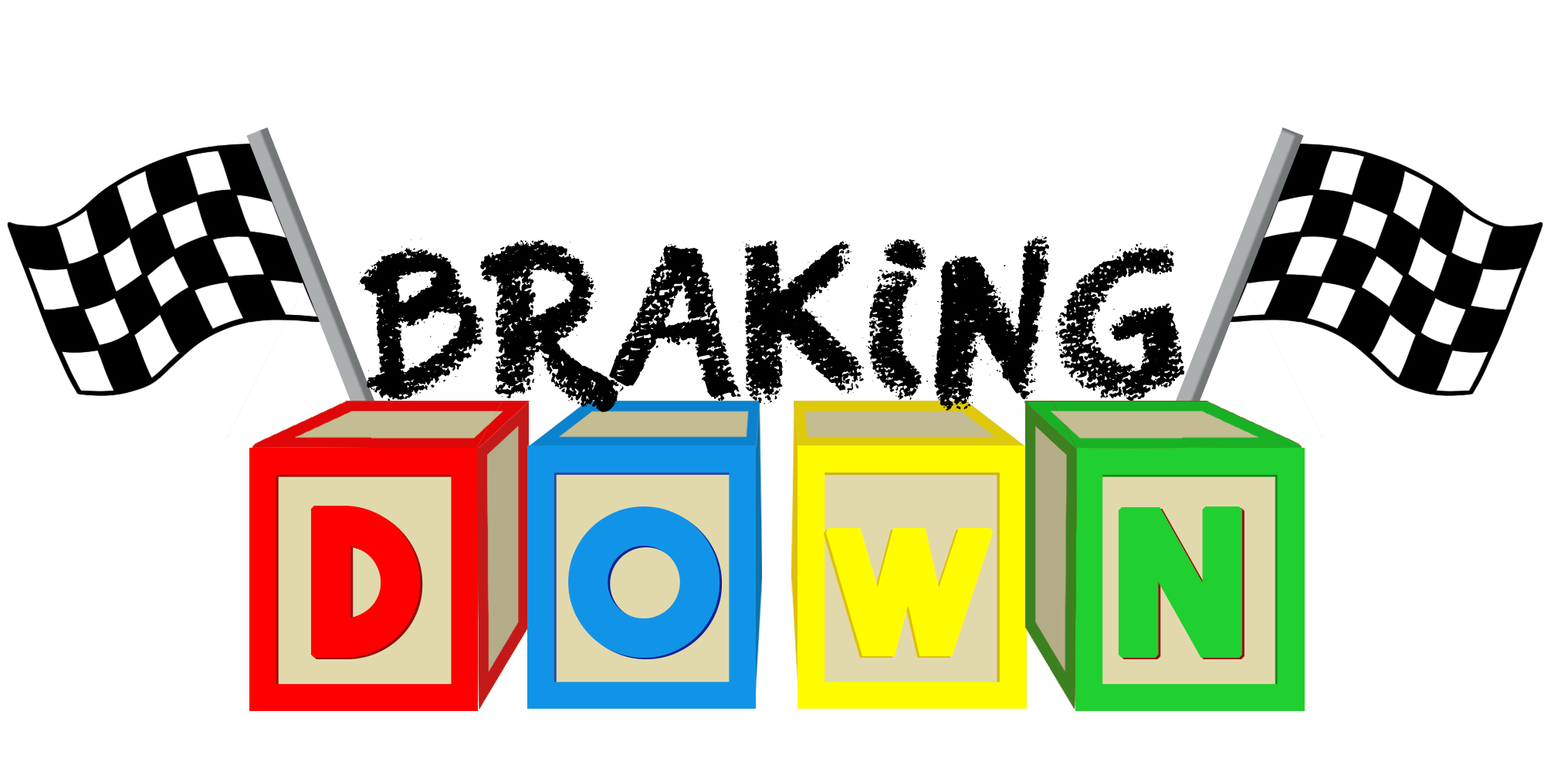
<style>
.page{position:relative;width:1544px;height:772px;background:#ffffff}
.page>*{position:absolute;margin:0}
.t1{font:173.5px "RightChalk";letter-spacing:0.01em;color:#000000;text-transform:uppercase;scale:0.94 1}
.t2{font:197.5px "TheBoldFont";color:#ff0000;text-transform:uppercase;font-weight:bold}
.t3{font:197.5px "TheBoldFont";color:#1194e7;text-transform:uppercase;font-weight:bold}
.t4{font:197.4px "TheBoldFont";color:#20cf30;text-transform:uppercase;font-weight:bold}
.t5{font:165.4px "TheBoldFont";color:#fffc00;text-transform:uppercase;font-weight:bold}
</style>
<div class="page">
<p class="t1" style="left:358px;top:236px;width:827px;height:177px">Braking</p>
<p class="t2" style="left:310px;top:506px;width:111px;height:152px">d</p>
<p class="t3" style="left:568px;top:507px;width:152px;height:151px">o</p>
<p class="t4" style="left:1118px;top:507px;width:124px;height:151px">n</p>
<p class="t5" style="left:825px;top:528px;width:169px;height:128px;rotate:180deg">wo</p>
</div>
